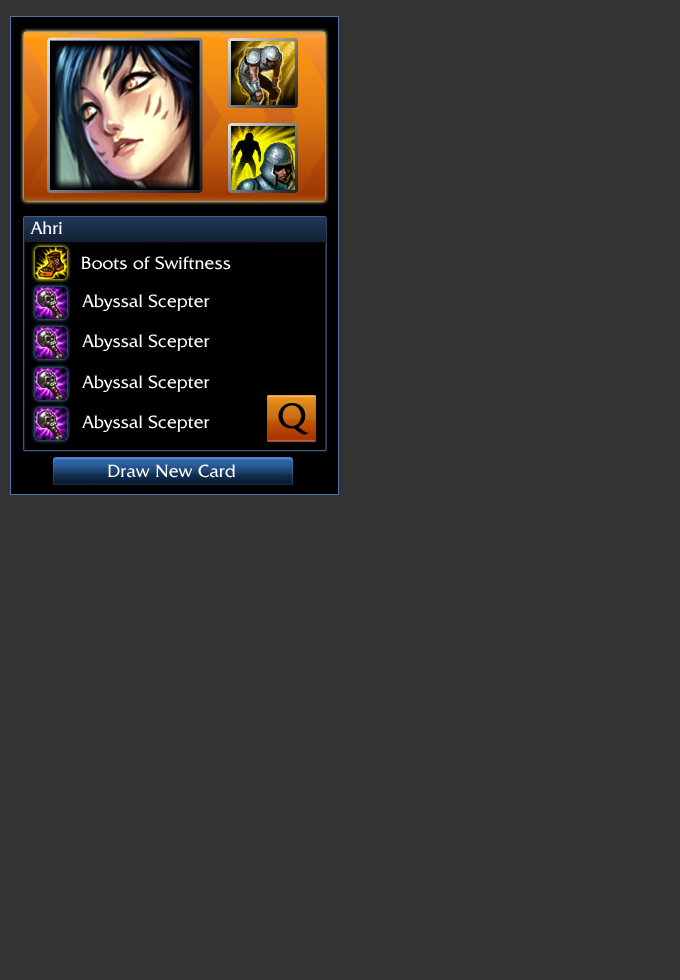
<style>
.page{position:relative;width:680px;height:980px;background:#333333}
.page>*{position:absolute;margin:0}
.t1{font:18px "FrizQuadrataITCbyBT-Roman";color:#ffffff}
.t2{font:36px "FrizQuadrataITCbyBT-Roman";color:#000000}
</style>
<div class="page">
<p class="t1" style="left:30px;top:221px;width:32px;height:13px">Ahri</p>
<p class="t1" style="left:81px;top:256px;width:150px;height:14px">Boots of Swiftness</p>
<p class="t1" style="left:81px;top:294px;width:129px;height:17px">Abyssal Scepter</p>
<p class="t1" style="left:81px;top:334px;width:129px;height:17px">Abyssal Scepter</p>
<p class="t1" style="left:81px;top:375px;width:129px;height:17px">Abyssal Scepter</p>
<p class="t2" style="left:278px;top:403px;width:31px;height:32px">Q</p>
<p class="t1" style="left:81px;top:415px;width:129px;height:17px">Abyssal Scepter</p>
<p class="t1" style="left:108px;top:464px;width:128px;height:14px">Draw New Card</p>
</div>
